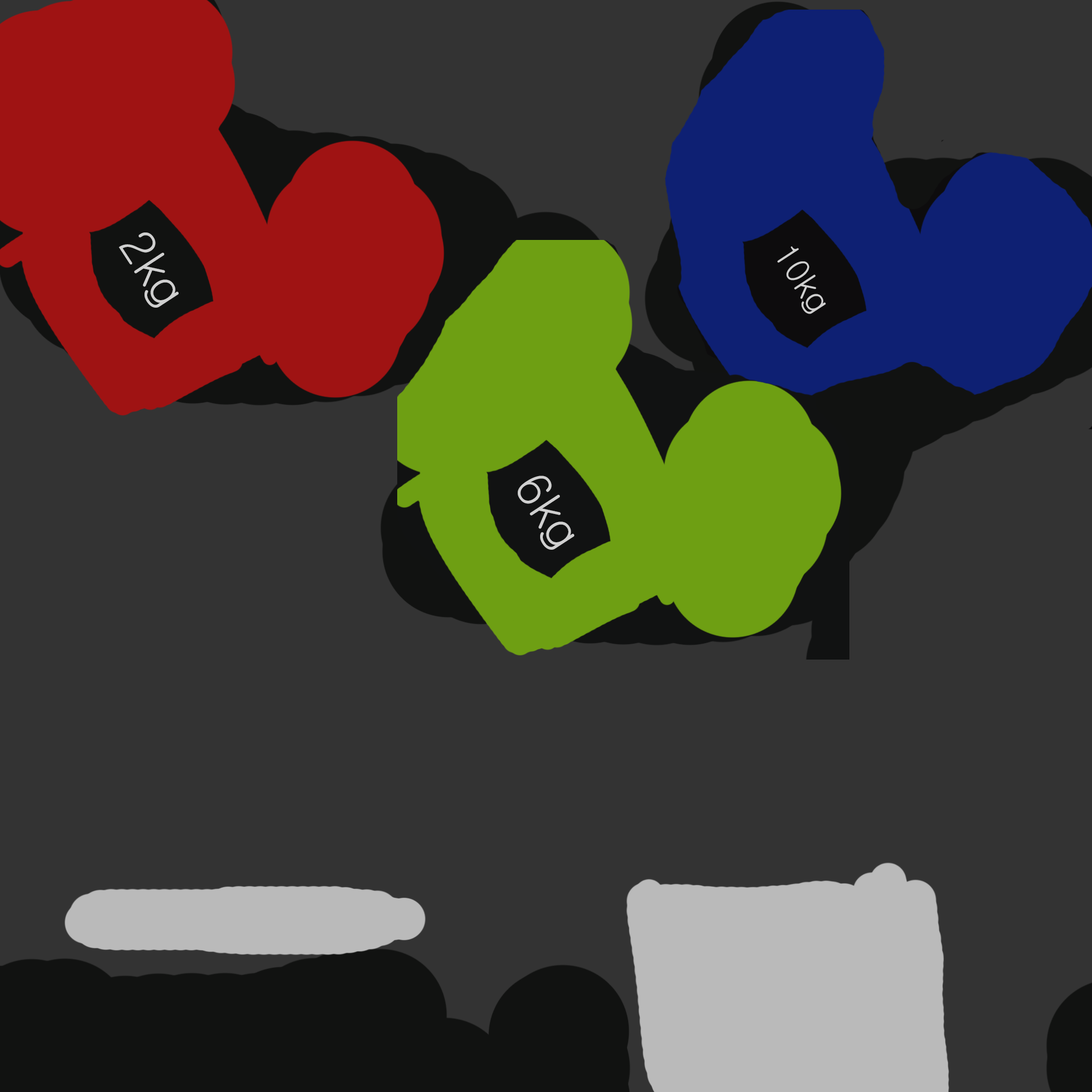
<style>
.page{position:relative;width:1092px;height:1092px;background:#333333}
.page>*{position:absolute;margin:0}
.t1{font:46.9px "Gulim";color:#d0d0d0}
.t2{font:33.1px "Gulim";color:#d0d0d0}
</style>
<div class="page">
<p class="t1" style="left:119px;top:232px;width:60px;height:76px;rotate:57deg">2kg</p>
<p class="t2" style="left:777px;top:246px;width:49px;height:68px;rotate:57deg">10kg</p>
<p class="t1" style="left:518px;top:476px;width:56px;height:74px;rotate:57deg">6kg</p>
</div>
